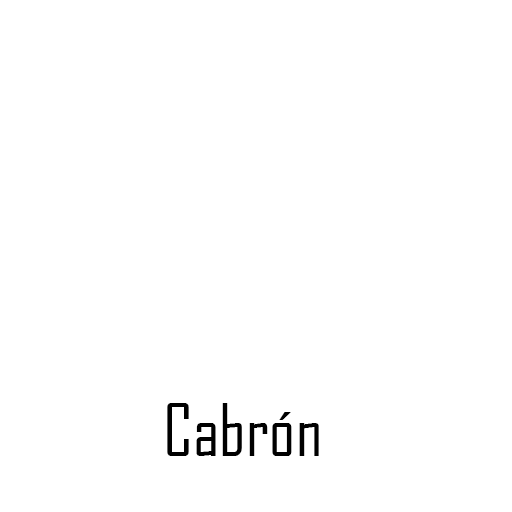
<style>
.page{position:relative;width:512px;height:512px;background:#ffffff}
.page>*{position:absolute;margin:0}
.t1{font:70px "AgencyFB-Reg";color:#000000}
</style>
<div class="page">
<p class="t1" style="left:167px;top:403px;width:152px;height:53px">Cabrón</p>
</div>
